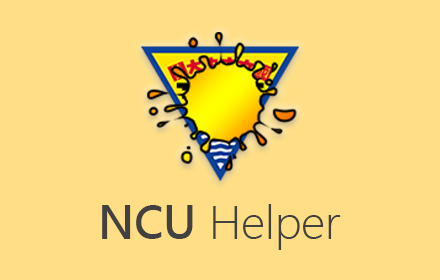
<style>
.page{position:relative;width:440px;height:280px;background:#ffde85}
.page>*{position:absolute;margin:0}
.t1{font:43.7px "MicrosoftJhengHeiLight";color:#414141}
.t2{font:43.7px "MicrosoftJhengHeiBold";color:#414141}
</style>
<div class="page">
<p class="t1" style="left:102px;top:204px;width:239px;height:46px"><span class="t2">NCU</span> Helper</p>
</div>
